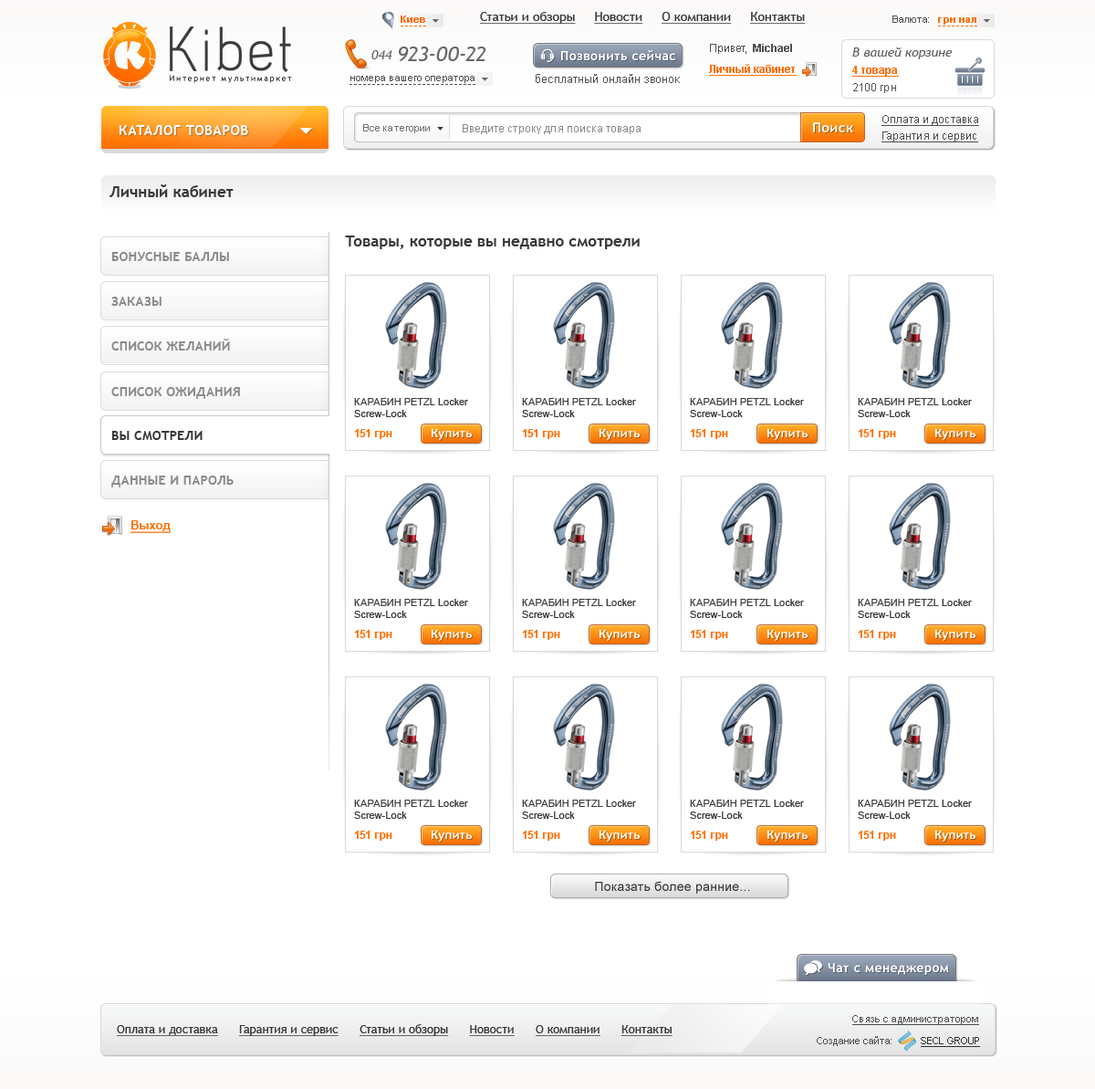
<style>
.page{position:relative;width:1095px;height:1089px;background:#ffffff}
.page>*{position:absolute;margin:0}
.t1{font:10px "Arial-BoldMT";color:#ff6e01}
.t2{font:12.8px "TrebuchetMS";color:#393939;text-decoration:underline}
.t3{font:10px "ArialMT";color:#4f4f4f}
.t4{font:79.8px "Acid";color:#3b3b3b}
.t5{font:12.8px "TrebuchetMS-Italic";color:#696969}
.t6{font:21px "TrebuchetMS-Italic";color:#696969}
.t7{font:12.8px "TrebuchetMS-Bold";letter-spacing:0.03em;color:#ffffff}
.t8{font:11px "ArialMT";color:#4f4f4f}
.t9{font:11px "Arial-BoldMT";color:#4f4f4f}
.t10{font:12.8px "TrebuchetMS-Italic";color:#616161}
.t11{font:11px "Arial-BoldMT";color:#ff6e01;text-decoration:underline}
.t12{font:8px "TrebuchetMS";letter-spacing:0.2em;color:#060606}
.t13{font:11.9px "ArialMT";color:#4f4f4f}
.t14{font:11px "ArialMT";color:#535353}
.t15{font:13.7px "TrebuchetMS-Bold";letter-spacing:0.03em;color:#ffffff}
.t16{font:10px "ArialMT";color:#727272}
.t17{font:11px "ArialMT";color:#888888}
.t18{font:11px "ArialMT";color:#4f4f4f;text-decoration:underline}
.t19{font:15.5px "TrebuchetMS-Bold";color:#393939}
.t20{font:12.8px "TrebuchetMS-Bold";letter-spacing:0.02em;color:#8b8b8b}
.t21{font:10px "ArialMT";color:#3a3a3a}
.t22{font:12.8px "TrebuchetMS-Bold";letter-spacing:0.02em;color:#393939}
.t23{font:11px "Arial-BoldMT";color:#ff6e01}
.t24{font:11.9px "TrebuchetMS-Bold";letter-spacing:0.03em;color:#ffffff}
.t25{font:11.9px "Arial-BoldMT";color:#ff6e01;text-decoration:underline}
.t26{font:12.8px "ArialMT";letter-spacing:0.02em;color:#393939}
.t27{font:11.9px "TrebuchetMS";color:#393939;text-decoration:underline}
.t28{font:10px "ArialMT";color:#4f4f4f;text-decoration:underline}
.t29{font:10px "ArialMT";color:#303030;text-decoration:underline}
</style>
<div class="page">
<p class="t1" style="left:401px;top:16px;width:24px;height:7px">Киев</p>
<p class="t2" style="left:480px;top:12px;width:326px;height:12px">Статьи и обзоры     Новости     О компании     Контакты</p>
<p class="t3" style="left:893px;top:16px;width:36px;height:7px">Валюта:</p>
<p class="t1" style="left:938px;top:17px;width:39px;height:8px">грн нал</p>
<p class="t4" style="left:170px;top:26px;width:121px;height:46px">Kibet</p>
<p class="t5" style="left:371px;top:50px;width:21px;height:9px">044</p>
<p class="t6" style="left:399px;top:47px;width:87px;height:14px">923-00-22</p>
<p class="t7" style="left:561px;top:49px;width:114px;height:11px">Позвонить сейчас</p>
<p class="t8" style="left:710px;top:44px;width:82px;height:10px">Привет,  <span class="t9">Michael</span></p>
<p class="t10" style="left:852px;top:47px;width:101px;height:12px">В вашей корзине</p>
<p class="t11" style="left:709px;top:64px;width:88px;height:12px">Личный кабинет</p>
<p class="t11" style="left:852px;top:66px;width:47px;height:11px">4 товара</p>
<p class="t12" style="left:170px;top:75px;width:122px;height:8px">Интернет мультимаркет</p>
<p class="t3" style="left:350px;top:76px;width:125px;height:7px">номера вашего оператора</p>
<p class="t13" style="left:536px;top:74px;width:144px;height:9px">бесплатный онлайн звонок</p>
<p class="t14" style="left:853px;top:83px;width:43px;height:10px">2100 грн</p>
<p class="t15" style="left:119px;top:125px;width:129px;height:10px">КАТАЛОГ ТОВАРОВ</p>
<p class="t16" style="left:363px;top:124px;width:67px;height:9px">Все категории</p>
<p class="t17" style="left:463px;top:124px;width:178px;height:10px">Введите строку для поиска товара</p>
<p class="t15" style="left:813px;top:122px;width:40px;height:10px">Поиск</p>
<p class="t18" style="left:882px;top:115px;width:97px;height:11px">Оплата и доставка</p>
<p class="t18" style="left:882px;top:131px;width:96px;height:11px">Гарантия и сервис</p>
<p class="t19" style="left:110px;top:184px;width:124px;height:13px">Личный кабинет</p>
<p class="t19" style="left:345px;top:235px;width:295px;height:14px">Товары, которые вы недавно смотрели</p>
<p class="t20" style="left:111px;top:252px;width:118px;height:9px">БОНУСНЫЕ БАЛЛЫ</p>
<p class="t20" style="left:111px;top:297px;width:51px;height:9px">ЗАКАЗЫ</p>
<p class="t20" style="left:111px;top:339px;width:119px;height:11px">СПИСОК ЖЕЛАНИЙ</p>
<p class="t20" style="left:111px;top:387px;width:129px;height:12px">СПИСОК ОЖИДАНИЯ</p>
<p class="t21" style="left:354px;top:398px;width:114px;height:19px">КАРАБИН PETZL Locker <br>Screw-Lock</p>
<p class="t21" style="left:522px;top:398px;width:114px;height:19px">КАРАБИН PETZL Locker <br>Screw-Lock</p>
<p class="t21" style="left:690px;top:398px;width:114px;height:19px">КАРАБИН PETZL Locker <br>Screw-Lock</p>
<p class="t21" style="left:858px;top:398px;width:114px;height:19px">КАРАБИН PETZL Locker <br>Screw-Lock</p>
<p class="t22" style="left:111px;top:431px;width:92px;height:9px">ВЫ СМОТРЕЛИ</p>
<p class="t23" style="left:354px;top:429px;width:38px;height:10px">151 грн</p>
<p class="t24" style="left:432px;top:428px;width:40px;height:12px">Купить</p>
<p class="t23" style="left:522px;top:429px;width:38px;height:10px">151 грн</p>
<p class="t24" style="left:600px;top:428px;width:40px;height:12px">Купить</p>
<p class="t23" style="left:690px;top:429px;width:38px;height:10px">151 грн</p>
<p class="t24" style="left:768px;top:428px;width:40px;height:12px">Купить</p>
<p class="t23" style="left:858px;top:429px;width:38px;height:10px">151 грн</p>
<p class="t24" style="left:935px;top:428px;width:41px;height:12px">Купить</p>
<p class="t20" style="left:111px;top:475px;width:123px;height:12px">ДАННЫЕ И ПАРОЛЬ</p>
<p class="t25" style="left:131px;top:520px;width:40px;height:13px">Выход</p>
<p class="t21" style="left:354px;top:599px;width:114px;height:19px">КАРАБИН PETZL Locker <br>Screw-Lock</p>
<p class="t21" style="left:522px;top:599px;width:114px;height:19px">КАРАБИН PETZL Locker <br>Screw-Lock</p>
<p class="t21" style="left:690px;top:599px;width:114px;height:19px">КАРАБИН PETZL Locker <br>Screw-Lock</p>
<p class="t21" style="left:858px;top:599px;width:114px;height:19px">КАРАБИН PETZL Locker <br>Screw-Lock</p>
<p class="t23" style="left:354px;top:630px;width:38px;height:10px">151 грн</p>
<p class="t24" style="left:432px;top:629px;width:40px;height:12px">Купить</p>
<p class="t23" style="left:522px;top:630px;width:38px;height:10px">151 грн</p>
<p class="t24" style="left:600px;top:629px;width:40px;height:12px">Купить</p>
<p class="t23" style="left:690px;top:630px;width:38px;height:10px">151 грн</p>
<p class="t24" style="left:768px;top:629px;width:40px;height:12px">Купить</p>
<p class="t23" style="left:858px;top:630px;width:38px;height:10px">151 грн</p>
<p class="t24" style="left:935px;top:629px;width:41px;height:12px">Купить</p>
<p class="t21" style="left:354px;top:799px;width:114px;height:20px">КАРАБИН PETZL Locker <br>Screw-Lock</p>
<p class="t21" style="left:522px;top:799px;width:114px;height:20px">КАРАБИН PETZL Locker <br>Screw-Lock</p>
<p class="t21" style="left:690px;top:799px;width:114px;height:20px">КАРАБИН PETZL Locker <br>Screw-Lock</p>
<p class="t21" style="left:858px;top:799px;width:114px;height:20px">КАРАБИН PETZL Locker <br>Screw-Lock</p>
<p class="t23" style="left:354px;top:831px;width:38px;height:10px">151 грн</p>
<p class="t24" style="left:432px;top:830px;width:40px;height:11px">Купить</p>
<p class="t23" style="left:522px;top:831px;width:38px;height:10px">151 грн</p>
<p class="t24" style="left:600px;top:830px;width:40px;height:11px">Купить</p>
<p class="t23" style="left:690px;top:831px;width:38px;height:10px">151 грн</p>
<p class="t24" style="left:768px;top:830px;width:40px;height:11px">Купить</p>
<p class="t23" style="left:858px;top:831px;width:38px;height:10px">151 грн</p>
<p class="t24" style="left:935px;top:830px;width:41px;height:11px">Купить</p>
<p class="t26" style="left:595px;top:881px;width:155px;height:12px">Показать более ранние...</p>
<p class="t7" style="left:828px;top:963px;width:121px;height:12px">Чат с менеджером</p>
<p class="t27" style="left:117px;top:1024px;width:556px;height:12px">Оплата и доставка      Гарантия и сервис      Статьи и обзоры      Новости      О компании      Контакты</p>
<p class="t28" style="left:852px;top:1015px;width:127px;height:10px">Связь с администратором</p>
<p class="t3" style="left:817px;top:1036px;width:75px;height:10px">Создание сайта:</p>
<p class="t29" style="left:921px;top:1037px;width:59px;height:10px">SECL GROUP</p>
</div>
